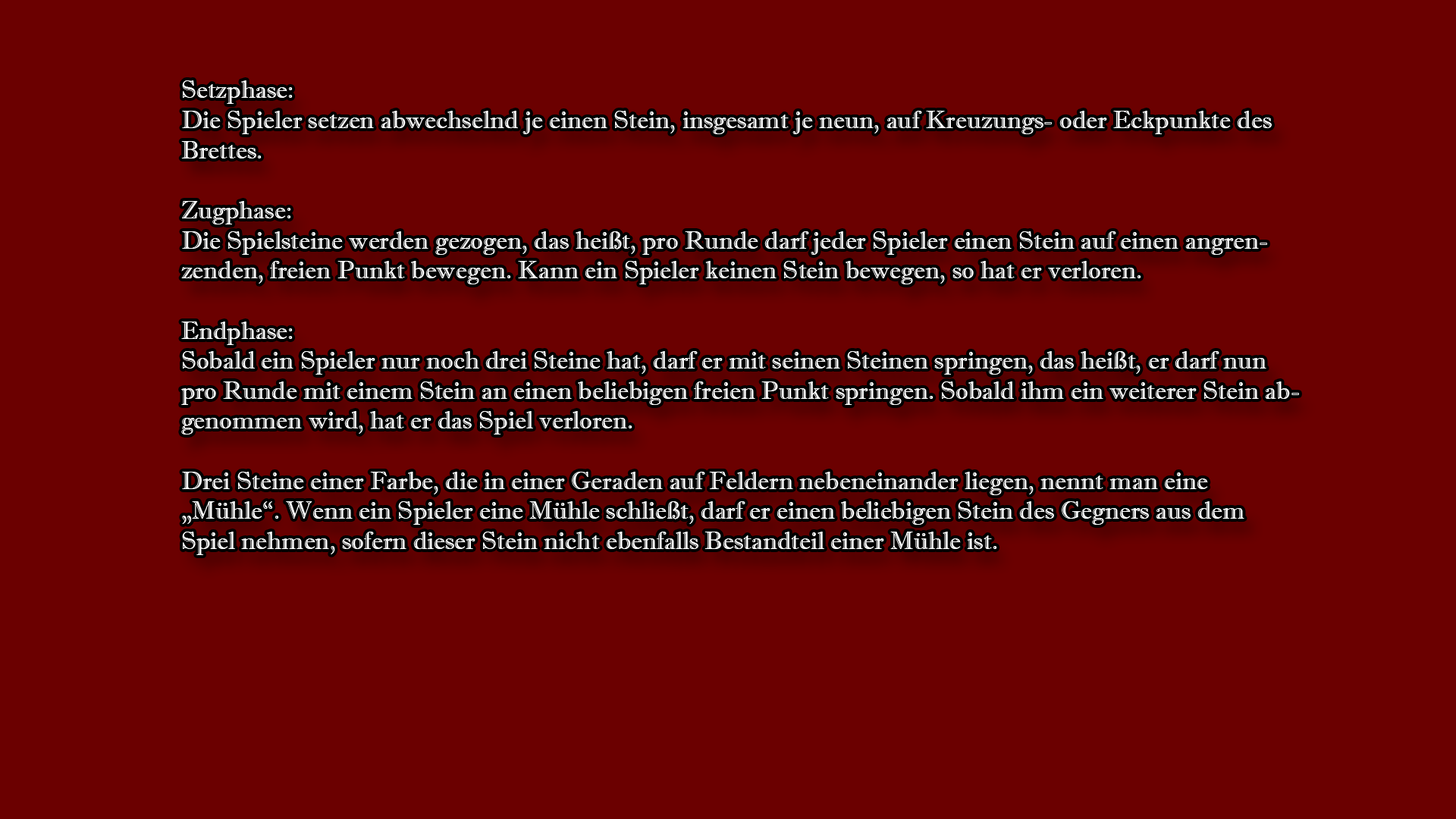
<style>
.page{position:relative;width:1456px;height:819px;background:#6b0000}
.page>*{position:absolute;margin:0}
.t1{font:25.1px "ImprintMT-Shadow";color:#ffffff}
</style>
<div class="page">
<p class="t1" style="left:181px;top:80px;width:1118px;height:475px">Setzphase:<br>Die Spieler setzen abwechselnd je einen Stein, insgesamt je neun, auf Kreuzungs- oder Eckpunkte des Brettes.<br><br>Zugphase: <br>Die Spielsteine werden gezogen, das heißt, pro Runde darf jeder Spieler einen Stein auf einen angrenzenden, freien Punkt bewegen. Kann ein Spieler keinen Stein bewegen, so hat er verloren.<br><br>Endphase: <br>Sobald ein Spieler nur noch drei Steine hat, darf er mit seinen Steinen springen, das heißt, er darf nun pro Runde mit einem Stein an einen beliebigen freien Punkt springen. Sobald ihm ein weiterer Stein abgenommen wird, hat er das Spiel verloren.<br><br>Drei Steine einer Farbe, die in einer Geraden auf Feldern nebeneinander liegen, nennt man eine „Mühle“. Wenn ein Spieler eine Mühle schließt, darf er einen beliebigen Stein des Gegners aus dem Spiel nehmen, sofern dieser Stein nicht ebenfalls Bestandteil einer Mühle ist.</p>
</div>
